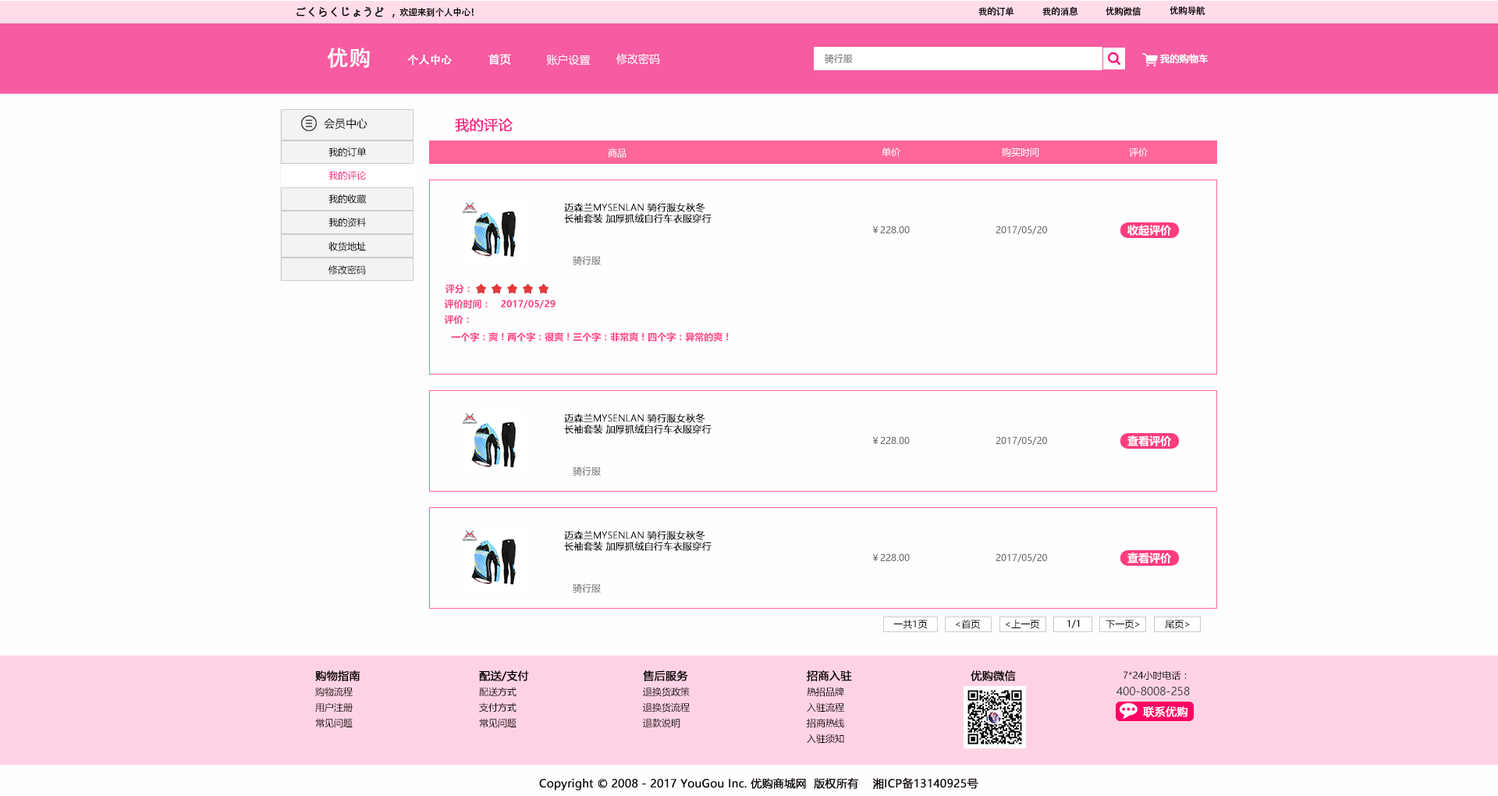
<style>
.page{position:relative;width:1498px;height:796px;background:#fffeff}
.page>*{position:absolute;margin:0}
.t1{font:10.9px "MicrosoftYaHei";color:#040000;font-weight:bold}
.t2{font:9.1px "AdobeHeitiStd-Regular";letter-spacing:-0.025em;color:#000000}
.t3{font:21.8px "AdobeHeitiStd-Regular";color:#ffffff;font-weight:bold}
.t4{font:10.9px "MicrosoftYaHei";color:#ffffff;font-weight:bold}
.t5{font:10.9px "MicrosoftYaHei";color:#ffffff}
.t6{font:9.4px "MicrosoftYaHei";color:#666666}
.t7{font:9.4px "MicrosoftYaHei";color:#ffffff;font-weight:bold}
.t8{font:10.9px "AdobeHeitiStd-Regular";color:#ffffff;font-weight:bold}
.t9{font:10.9px "MicrosoftYaHei";color:#040000}
.t10{font:14px "MicrosoftYaHei";color:#f72583;font-weight:bold}
.t11{font:9.4px "MicrosoftYaHei";color:#040000}
.t12{font:9.4px "MicrosoftYaHei";color:#ffffff}
.t13{font:9.4px "MicrosoftYaHei";color:#f72583}
.t14{font:9.4px "MicrosoftYaHei";color:#060001}
.t15{font:9.4px/10.9px "MicrosoftYaHeiLight";color:#000000;font-weight:bold}
.t16{font:10.9px "MicrosoftYaHei-Bold";color:#ffffff}
.t17{font:9.4px "MicrosoftYaHei-Bold";color:#ff4080}
.t18{font:9.4px "MicrosoftYaHei";color:#000000}
.t19{font:10.9px "MicrosoftYaHei";color:#323333}
.t20{font:10.9px "MicrosoftYaHei";color:#0e050a;font-weight:bold}
</style>
<div class="page">
<p class="t1" style="left:297px;top:7px;width:177px;height:11px">ごくらくじょうど ，<span class="t2">欢迎来到个人中心！</span></p>
<p class="t2" style="left:979px;top:6px;width:35px;height:10px">我的订单</p>
<p class="t2" style="left:1042px;top:6px;width:36px;height:10px">我的消息</p>
<p class="t2" style="left:1106px;top:6px;width:35px;height:10px">优购微信</p>
<p class="t2" style="left:1170px;top:6px;width:36px;height:10px">优购导航</p>
<p class="t3" style="left:327px;top:48px;width:43px;height:20px">优购</p>
<p class="t4" style="left:488px;top:54px;width:23px;height:11px">首页</p>
<p class="t5" style="left:616px;top:53px;width:44px;height:12px">修改密码</p>
<p class="t6" style="left:825px;top:54px;width:28px;height:9px">骑行服</p>
<p class="t7" style="left:1160px;top:54px;width:49px;height:10px">我的购物车</p>
<p class="t8" style="left:407px;top:55px;width:45px;height:11px">个人中心</p>
<p class="t5" style="left:546px;top:55px;width:45px;height:11px">账户设置</p>
<p class="t9" style="left:324px;top:118px;width:44px;height:12px">会员中心</p>
<p class="t10" style="left:455px;top:118px;width:58px;height:14px">我的评论</p>
<p class="t11" style="left:329px;top:147px;width:38px;height:10px">我的订单</p>
<p class="t12" style="left:608px;top:148px;width:19px;height:10px">商品</p>
<p class="t12" style="left:882px;top:147px;width:18px;height:10px">单价</p>
<p class="t12" style="left:1002px;top:147px;width:37px;height:10px">购买时间</p>
<p class="t12" style="left:1129px;top:147px;width:19px;height:10px">评价</p>
<p class="t13" style="left:329px;top:171px;width:38px;height:9px">我的评论</p>
<p class="t14" style="left:329px;top:194px;width:38px;height:10px">我的收藏</p>
<p class="t15" style="left:564px;top:203px;width:148px;height:20px">迈森兰MYSENLAN 骑行服女秋冬<br>长袖套装 加厚抓绒自行车衣服穿行</p>
<p class="t14" style="left:329px;top:217px;width:37px;height:10px">我的资料</p>
<p class="t6" style="left:872px;top:226px;width:38px;height:7px">￥228.00</p>
<p class="t6" style="left:996px;top:226px;width:51px;height:9px">2017/05/20</p>
<p class="t16" style="left:1128px;top:225px;width:43px;height:11px">收起评价</p>
<p class="t14" style="left:329px;top:242px;width:37px;height:9px">收货地址</p>
<p class="t6" style="left:573px;top:255px;width:28px;height:10px">骑行服</p>
<p class="t14" style="left:329px;top:265px;width:37px;height:10px">修改密码</p>
<p class="t17" style="left:446px;top:284px;width:24px;height:9px">评分：</p>
<p class="t17" style="left:444px;top:299px;width:112px;height:10px">评价时间： 2017/05/29</p>
<p class="t17" style="left:444px;top:314px;width:25px;height:11px">评价：</p>
<p class="t17" style="left:451px;top:332px;width:278px;height:10px">一个字：爽！两个字：很爽！三个字：非常爽！四个字：异常的爽！</p>
<p class="t15" style="left:564px;top:414px;width:148px;height:20px">迈森兰MYSENLAN 骑行服女秋冬<br>长袖套装 加厚抓绒自行车衣服穿行</p>
<p class="t6" style="left:872px;top:436px;width:38px;height:8px">￥228.00</p>
<p class="t6" style="left:996px;top:436px;width:51px;height:10px">2017/05/20</p>
<p class="t16" style="left:1128px;top:435px;width:43px;height:11px">查看评价</p>
<p class="t6" style="left:573px;top:466px;width:28px;height:10px">骑行服</p>
<p class="t15" style="left:564px;top:531px;width:148px;height:20px">迈森兰MYSENLAN 骑行服女秋冬<br>长袖套装 加厚抓绒自行车衣服穿行</p>
<p class="t6" style="left:872px;top:553px;width:38px;height:8px">￥228.00</p>
<p class="t6" style="left:996px;top:553px;width:51px;height:10px">2017/05/20</p>
<p class="t16" style="left:1128px;top:552px;width:43px;height:11px">查看评价</p>
<p class="t6" style="left:573px;top:583px;width:28px;height:10px">骑行服</p>
<p class="t18" style="left:893px;top:620px;width:35px;height:9px">一共1页</p>
<p class="t18" style="left:956px;top:620px;width:24px;height:9px">&lt;首页</p>
<p class="t18" style="left:1006px;top:620px;width:33px;height:9px">&lt;上一页</p>
<p class="t18" style="left:1067px;top:620px;width:13px;height:8px">1/1</p>
<p class="t18" style="left:1106px;top:620px;width:34px;height:9px">下一页&gt;</p>
<p class="t18" style="left:1165px;top:620px;width:25px;height:9px">尾页&gt;</p>
<p class="t1" style="left:315px;top:670px;width:46px;height:11px">购物指南</p>
<p class="t1" style="left:479px;top:670px;width:50px;height:11px">配送/支付</p>
<p class="t1" style="left:643px;top:670px;width:45px;height:11px">售后服务</p>
<p class="t1" style="left:807px;top:670px;width:45px;height:11px">招商入驻</p>
<p class="t1" style="left:971px;top:670px;width:45px;height:11px">优购微信</p>
<p class="t11" style="left:1123px;top:670px;width:64px;height:10px">7*24小时电话：</p>
<p class="t11" style="left:315px;top:687px;width:38px;height:10px">购物流程</p>
<p class="t11" style="left:479px;top:687px;width:38px;height:10px">配送方式</p>
<p class="t11" style="left:643px;top:687px;width:47px;height:10px">退换货政策</p>
<p class="t11" style="left:807px;top:687px;width:37px;height:10px">热招品牌</p>
<p class="t19" style="left:1117px;top:687px;width:73px;height:8px">400-8008-258</p>
<p class="t11" style="left:315px;top:702px;width:38px;height:10px">用户注册</p>
<p class="t11" style="left:479px;top:702px;width:38px;height:10px">支付方式</p>
<p class="t11" style="left:643px;top:702px;width:47px;height:10px">退换货流程</p>
<p class="t11" style="left:807px;top:702px;width:37px;height:10px">入驻流程</p>
<p class="t4" style="left:1143px;top:706px;width:45px;height:11px">联系优购</p>
<p class="t11" style="left:315px;top:718px;width:38px;height:10px">常见问题</p>
<p class="t11" style="left:479px;top:718px;width:38px;height:10px">常见问题</p>
<p class="t11" style="left:643px;top:718px;width:37px;height:10px">退款说明</p>
<p class="t11" style="left:807px;top:718px;width:37px;height:10px">招商热线</p>
<p class="t11" style="left:807px;top:733px;width:37px;height:11px">入驻须知</p>
<p class="t20" style="left:539px;top:777px;width:440px;height:13px">Copyright © 2008 - 2017 YouGou Inc. 优购商城网  版权所有    湘ICP备13140925号</p>
</div>
